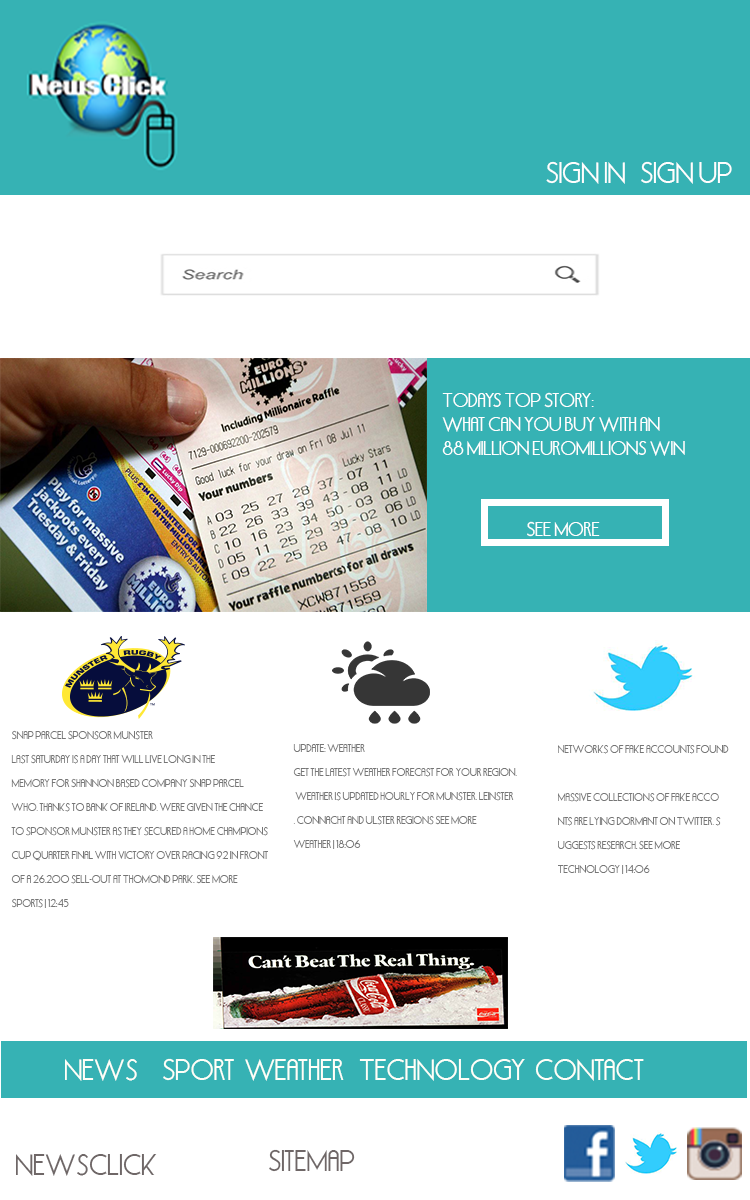
<style>
.page{position:relative;width:750px;height:1200px;background:#ffffff}
.page>*{position:absolute;margin:0}
.t1{font:24px "Delhi";letter-spacing:0.002em;color:#fffefe}
.t2{font:16px/24px "Delhi";letter-spacing:0.002em;color:#ffffff}
.t3{font:16px "Delhi";letter-spacing:0.002em;color:#ffffff}
.t4{font:9px/24px "Delhi";letter-spacing:0.002em;color:#767676}
.t5{font:24px "Delhi";letter-spacing:0.002em;color:#fffff8}
.t6{font:24px "Delhi";letter-spacing:0.002em;color:#6f6767}
</style>
<div class="page">
<p class="t1" style="left:546px;top:161px;width:186px;height:23px">Sign In   Sign UP</p>
<p class="t2" style="left:442px;top:392px;width:243px;height:64px">Todays Top Story: <br>What can you buy with an <br>88 million EuroMillions win</p>
<p class="t3" style="left:527px;top:521px;width:73px;height:16px">See more</p>
<p class="t4" style="left:11px;top:730px;width:257px;height:178px">Snap Parcel Sponsor Munster<br>Last Saturday is a day that will live long in the <br>memory for Shannon based company Snap Parcel <br>who, thanks to Bank of Ireland, were given the chance <br>to sponsor Munster as they secured a home Champions <br>Cup quarter final with victory over Racing 92 in front <br>of a 26,200 sell-out at Thomond Park. See More<br>Sports | 12:45</p>
<p class="t4" style="left:293px;top:744px;width:224px;height:105px">Update: Weather<br>Get the latest weather forecast for your region.<br> Weather is updated hourly for Munster, Leinster<br>, Connacht and Ulster regions See More<br>Weather | 18:06</p>
<p class="t4" style="left:558px;top:745px;width:171px;height:129px">Networks of fake accounts found<br><br>Massive collections of fake acco<br>nts are lying dormant on Twitter, s<br>uggests research. See More<br>Technology | 14:06</p>
<p class="t5" style="left:65px;top:1058px;width:579px;height:23px">News     Sport  Weather   TechNology  Contact</p>
<p class="t6" style="left:16px;top:1154px;width:141px;height:22px">Newsclick</p>
<p class="t6" style="left:269px;top:1149px;width:86px;height:23px">Sitemap</p>
</div>
